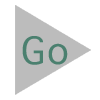
<style>
.page{position:relative;width:100px;height:100px;background:#ffffff}
.page>*{position:absolute;margin:0}
.t1{font:36px "Thonburi";letter-spacing:0.05em;color:#4b806f}
</style>
<div class="page">
<p class="t1" style="left:22px;top:36px;width:46px;height:29px">Go</p>
</div>
